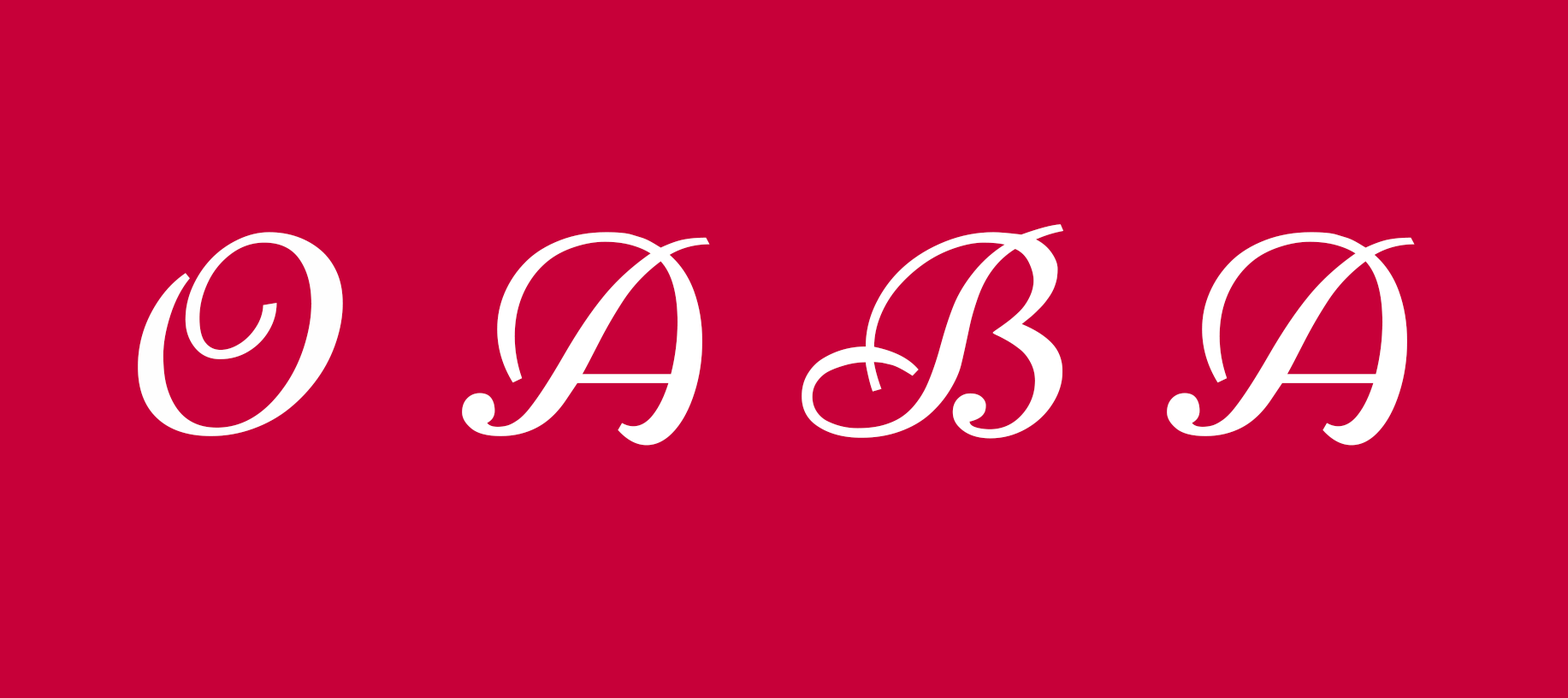
<style>
.page{position:relative;width:1568px;height:698px;background:#c70039}
.page>*{position:absolute;margin:0}
.t1{font:285.1px "Niconne-Regular";color:#fefefe}
.t2{font:285.1px "Niconne-Regular";color:#ffffff}
</style>
<div class="page">
<p class="t1" style="left:138px;top:232px;width:205px;height:204px">O</p>
<p class="t2" style="left:462px;top:232px;width:248px;height:214px">A</p>
<p class="t2" style="left:802px;top:224px;width:261px;height:215px">B</p>
<p class="t2" style="left:1167px;top:232px;width:248px;height:214px">A</p>
</div>
